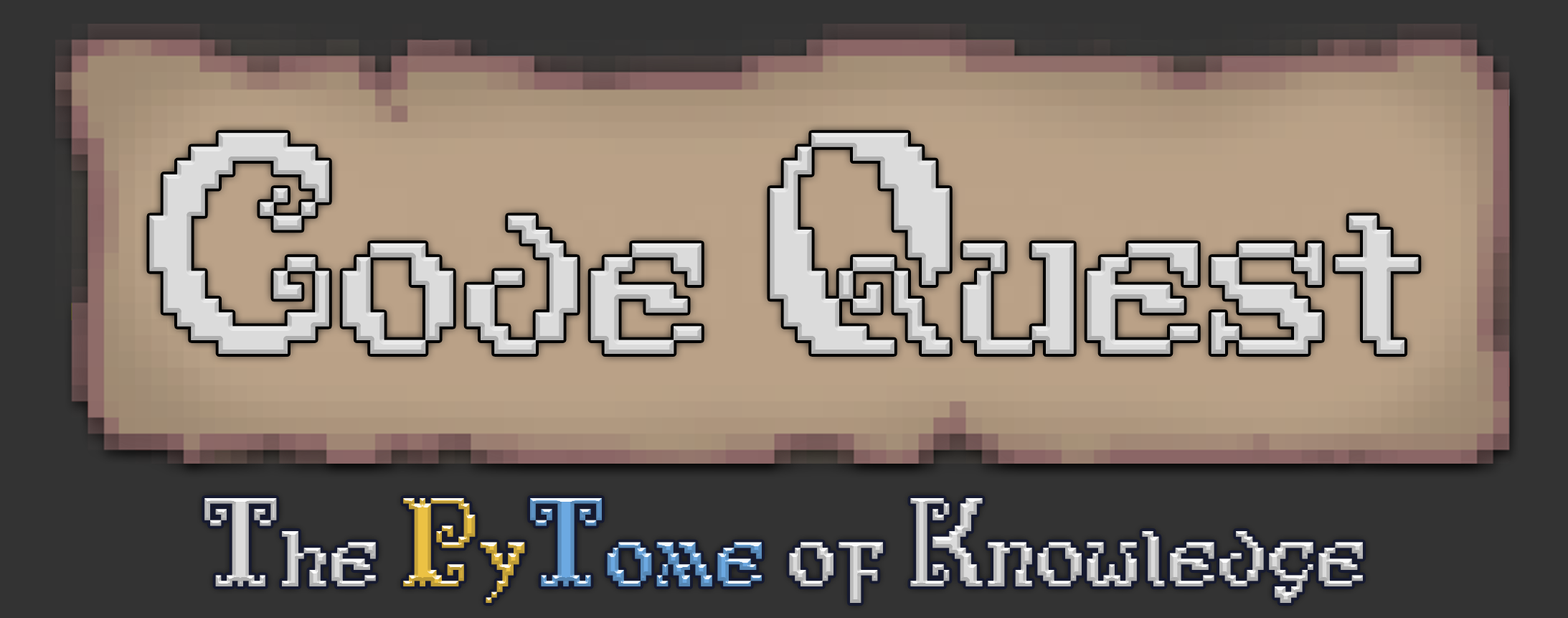
<style>
.page{position:relative;width:1568px;height:618px;background:#333333}
.page>*{position:absolute;margin:0}
.t1{font:179.3px "Antiquity-print";color:#dbdbdb}
.t2{font:71.7px "Antiquity-print"}
</style>
<div class="page">
<p class="t1" style="left:149px;top:133px;width:1270px;height:221px">Code Quest</p>
<p class="t2" style="left:204px;top:498px;width:1159px;height:105px">The PyTome of Knowledge</p>
</div>
